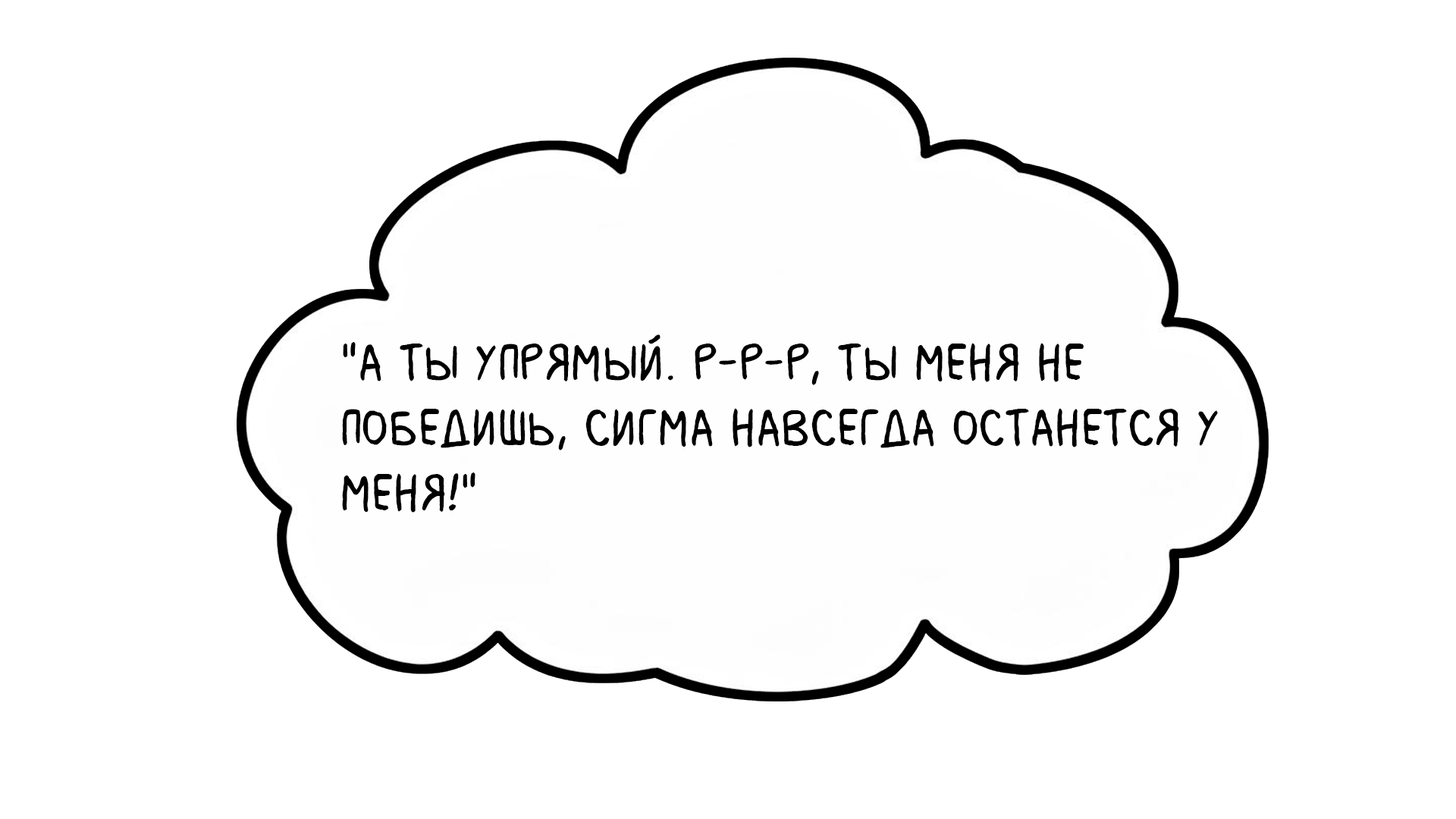
<style>
.page{position:relative;width:1456px;height:819px;background:#ffffff}
.page>*{position:absolute;margin:0}
.t1{font:54.6px "MilkMustacheBB";color:#000000}
</style>
<div class="page">
<p class="t1" style="left:342px;top:334px;width:876px;height:179px">"А ты упрямый. Р-р-р, ты меня не <br>победишь, Сигма навсегда останется у <br>меня!"</p>
</div>
